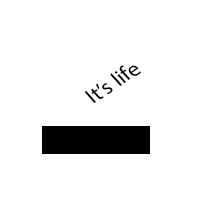
<style>
.page{position:relative;width:200px;height:200px;background:#ffffff}
.page>*{position:absolute;margin:0}
.t1{font:22px "MyriadPro-Regular";color:#000000;scale:1.04 1}
</style>
<div class="page">
<p class="t1" style="left:84px;top:65px;width:57px;height:38px;rotate:-33deg">It’s life</p>
</div>
